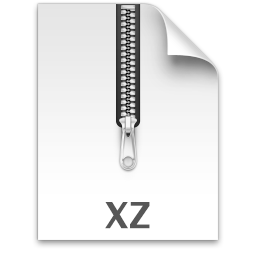
<style>
.page{position:relative;width:256px;height:256px;background:#ffffff}
.page>*{position:absolute;margin:0}
.t1{font:36.2px "LucidaSans-Demi";letter-spacing:-0.013em;color:#575757}
</style>
<div class="page">
<p class="t1" style="left:105px;top:202px;width:45px;height:27px">XZ</p>
</div>
